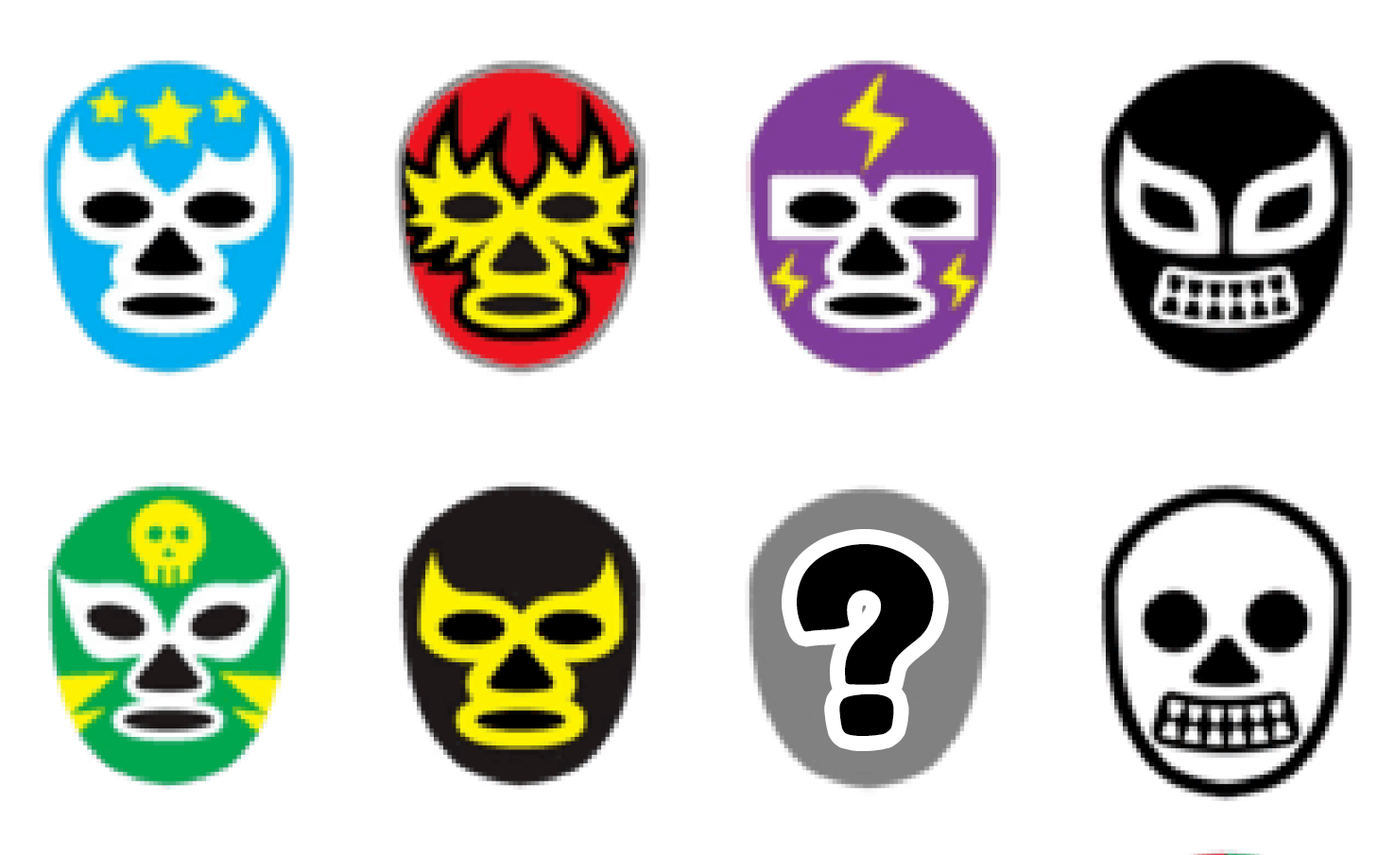
<style>
.page{position:relative;width:1395px;height:855px;background:#ffffff}
.page>*{position:absolute;margin:0}
.t1{font:240.4px "Brown-Cake";color:#000000}
</style>
<div class="page">
<p class="t1" style="left:796px;top:544px;width:137px;height:192px">?</p>
</div>
